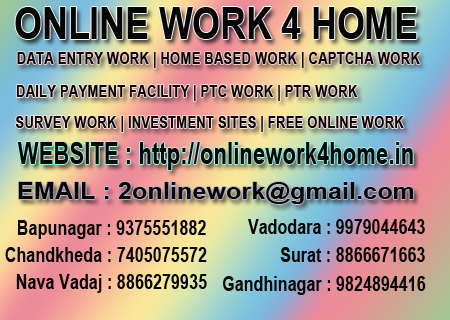
<style>
.page{position:relative;width:450px;height:320px}
.page>*{position:absolute;margin:0}
.t1{font:45.5px "Arial-BoldMT";color:#060606;scale:0.78 1}
.t2{font:16.9px "Arial-BoldMT";color:#060606;scale:0.79 1}
.t3{font:31.4px "Arial-BoldMT";color:#060606;scale:0.71 1}
.t4{font:22.8px "Arial-BoldMT";color:#060606;scale:1.11 1}
.t5{font:21px "Arial-BoldMT";color:#060606;scale:0.78 1}
.t6{font:21px "Arial-BoldMT";color:#060606;scale:0.77 1}
</style>
<div class="page">
<p class="t1" style="left:15px;top:7px;width:402px;height:32px">ONLINE WORK 4 HOME</p>
<p class="t2" style="left:17px;top:52px;width:403px;height:16px">DATA ENTRY WORK | HOME BASED WORK | CAPTCHA WORK</p>
<p class="t2" style="left:16px;top:85px;width:342px;height:16px">DAILY PAYMENT FACILITY | PTC WORK | PTR WORK</p>
<p class="t2" style="left:15px;top:116px;width:389px;height:16px">SURVEY WORK | INVESTMENT SITES | FREE ONLINE WORK</p>
<p class="t3" style="left:17px;top:142px;width:396px;height:28px">WEBSITE : http://onlinework4home.in</p>
<p class="t4" style="left:18px;top:182px;width:396px;height:22px">EMAIL : 2onlinework@gmail.com</p>
<p class="t5" style="left:18px;top:220px;width:188px;height:19px">Bapunagar : 9375551882</p>
<p class="t6" style="left:248px;top:219px;width:177px;height:15px">Vadodara : 9979044643</p>
<p class="t5" style="left:5px;top:247px;width:202px;height:15px">Chandkheda : 7405075572</p>
<p class="t6" style="left:280px;top:247px;width:145px;height:15px">Surat : 8866671663</p>
<p class="t5" style="left:16px;top:274px;width:191px;height:19px">Nava Vadaj : 8866279935</p>
<p class="t6" style="left:223px;top:276px;width:203px;height:19px">Gandhinagar : 9824894416</p>
</div>
